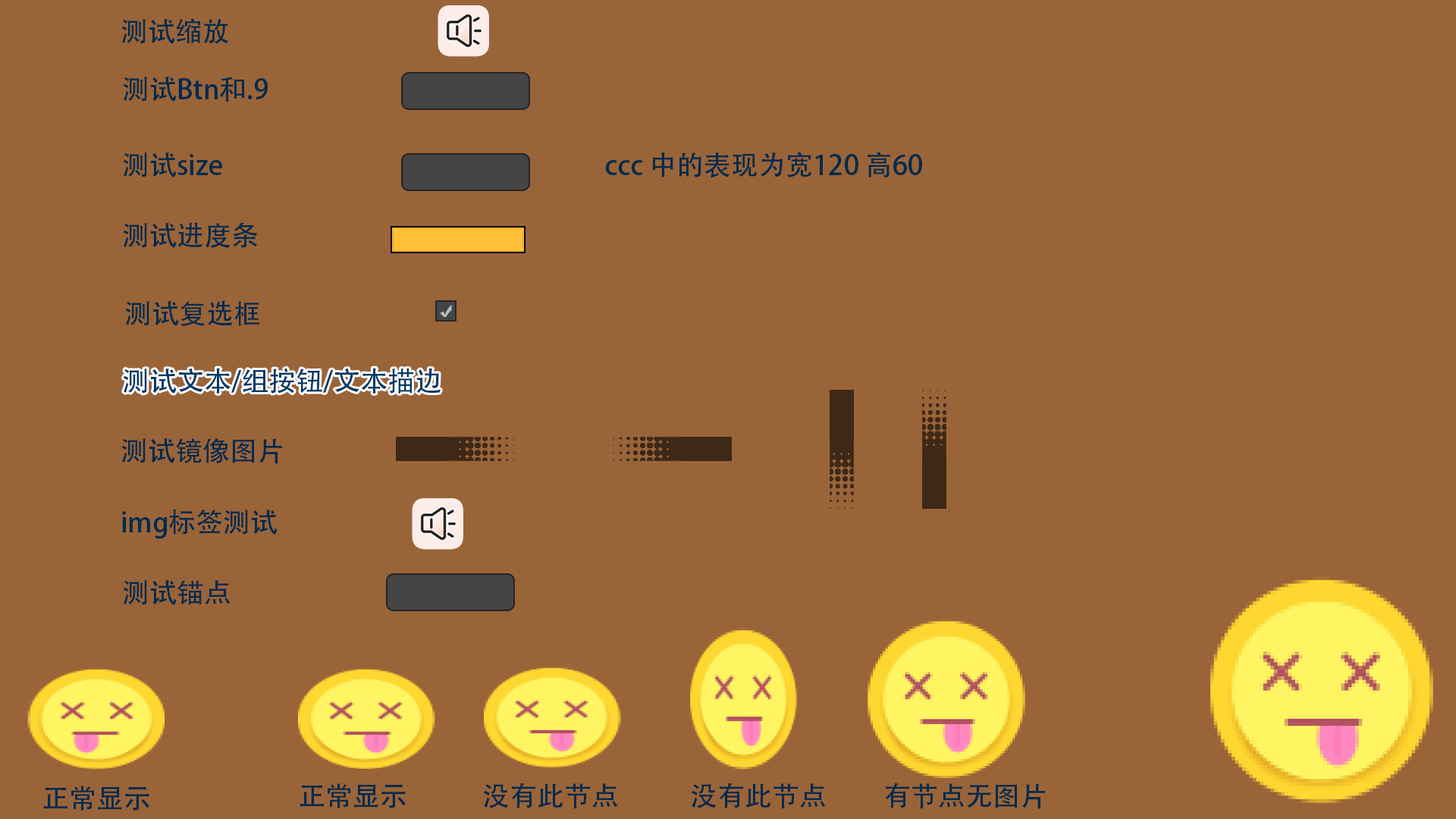
<style>
.page{position:relative;width:1456px;height:819px;background:#9a6439}
.page>*{position:absolute;margin:0}
.t1{font:27.3px "AdobeHeitiStd-Regular";color:#002b4c}
.t2{font:27.3px "AdobeHeitiStd-Regular";color:#003965}
</style>
<div class="page">
<p class="t1" style="left:121px;top:18px;width:108px;height:26px">测试缩放</p>
<p class="t1" style="left:123px;top:77px;width:145px;height:25px">测试Btn和.9</p>
<p class="t1" style="left:123px;top:152px;width:99px;height:25px">测试size</p>
<p class="t1" style="left:605px;top:152px;width:317px;height:26px">ccc 中的表现为宽120 高60</p>
<p class="t1" style="left:123px;top:222px;width:135px;height:26px">测试进度条</p>
<p class="t1" style="left:125px;top:300px;width:134px;height:26px">测试复选框</p>
<p class="t2" style="left:123px;top:368px;width:318px;height:26px">测试文本/组按钮/文本描边</p>
<p class="t1" style="left:121px;top:438px;width:161px;height:26px">测试镜像图片</p>
<p class="t1" style="left:122px;top:510px;width:156px;height:29px">img标签测试</p>
<p class="t1" style="left:123px;top:580px;width:108px;height:25px">测试锚点</p>
<p class="t1" style="left:43px;top:786px;width:106px;height:25px">正常显示</p>
<p class="t1" style="left:300px;top:783px;width:106px;height:25px">正常显示</p>
<p class="t1" style="left:484px;top:783px;width:134px;height:25px">没有此节点</p>
<p class="t1" style="left:692px;top:783px;width:134px;height:25px">没有此节点</p>
<p class="t1" style="left:885px;top:783px;width:160px;height:26px">有节点无图片</p>
</div>
